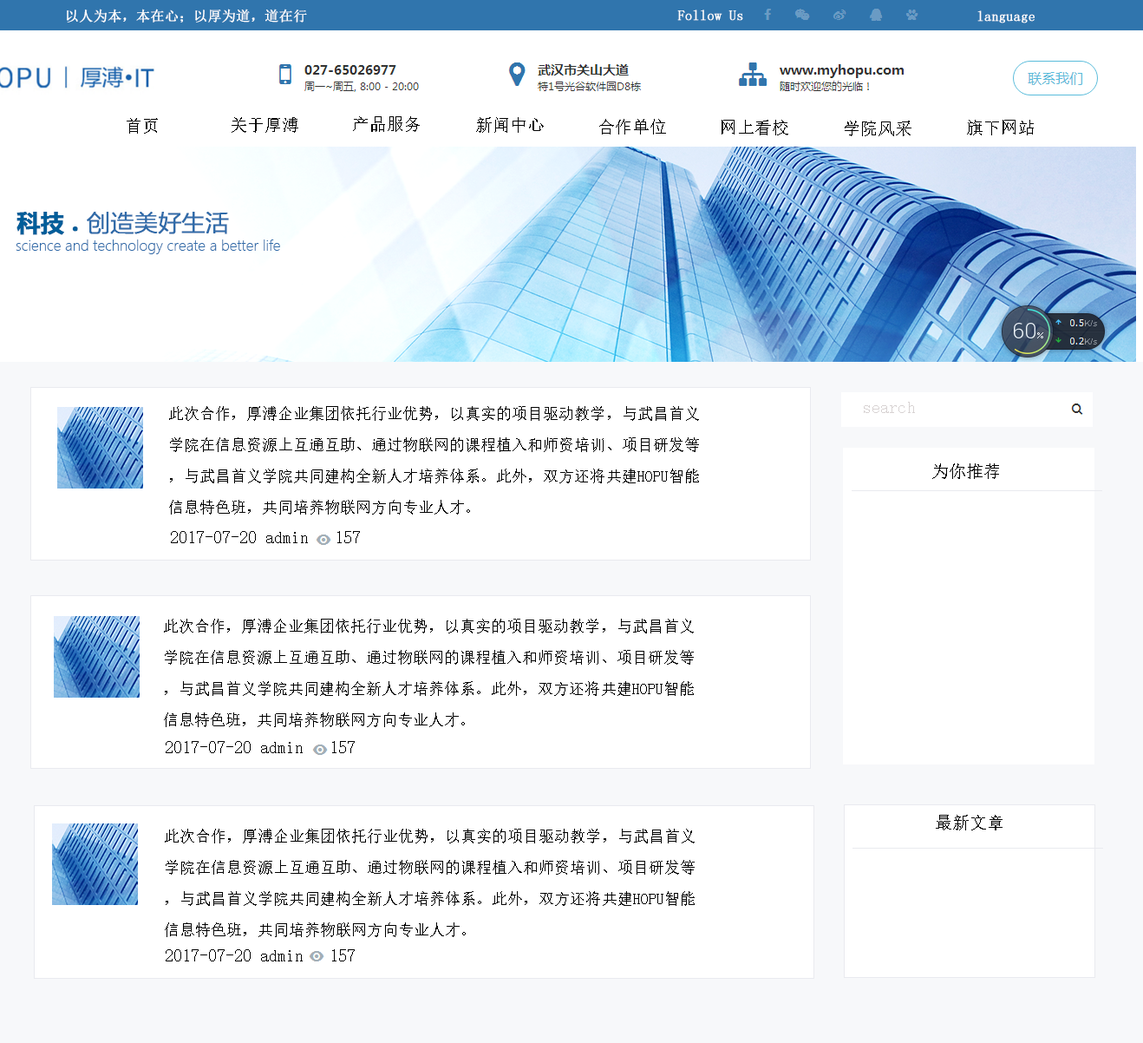
<style>
.page{position:relative;width:1143px;height:1043px;background:#ffffff}
.page>*{position:absolute;margin:0}
.t1{font:13.9px "SimSun";letter-spacing:0.002em;color:#ffffff;font-weight:bold}
.t2{font:17.4px "SimSun";letter-spacing:0.002em;color:#000000}
.t3{font:17.4px "SimSun";letter-spacing:0.002em;color:#d8d3d3}
.t4{font:15.6px/31.2px "SimSun";letter-spacing:0.002em;color:#000000}
</style>
<div class="page">
<p class="t1" style="left:67px;top:9px;width:240px;height:14px">以人为本，本在心；以厚为道，道在行</p>
<p class="t1" style="left:678px;top:10px;width:66px;height:11px">Follow Us</p>
<p class="t1" style="left:978px;top:10px;width:57px;height:13px">language</p>
<p class="t2" style="left:127px;top:118px;width:31px;height:16px">首页</p>
<p class="t2" style="left:232px;top:117px;width:66px;height:16px">关于厚溥</p>
<p class="t2" style="left:353px;top:116px;width:67px;height:16px">产品服务</p>
<p class="t2" style="left:476px;top:117px;width:68px;height:16px">新闻中心</p>
<p class="t2" style="left:599px;top:119px;width:67px;height:15px">合作单位</p>
<p class="t2" style="left:722px;top:120px;width:67px;height:15px">网上看校</p>
<p class="t2" style="left:845px;top:121px;width:67px;height:15px">学院风采</p>
<p class="t2" style="left:967px;top:120px;width:67px;height:15px">旗下网站</p>
<p class="t3" style="left:864px;top:402px;width:51px;height:11px">search</p>
<p class="t4" style="left:169px;top:406px;width:530px;height:108px">此次合作，厚溥企业集团依托行业优势，以真实的项目驱动教学，与武昌首义<br>学院在信息资源上互通互助、通过物联网的课程植入和师资培训、项目研发等<br>，与武昌首义学院共同建构全新人才培养体系。此外，双方还将共建HOPU智能<br>信息特色班，共同培养物联网方向专业人才。</p>
<p class="t2" style="left:933px;top:463px;width:66px;height:16px">为你推荐</p>
<p class="t2" style="left:171px;top:531px;width:189px;height:12px">2017-07-20 admin   157</p>
<p class="t4" style="left:164px;top:619px;width:530px;height:108px">此次合作，厚溥企业集团依托行业优势，以真实的项目驱动教学，与武昌首义<br>学院在信息资源上互通互助、通过物联网的课程植入和师资培训、项目研发等<br>，与武昌首义学院共同建构全新人才培养体系。此外，双方还将共建HOPU智能<br>信息特色班，共同培养物联网方向专业人才。</p>
<p class="t2" style="left:166px;top:741px;width:189px;height:12px">2017-07-20 admin   157</p>
<p class="t2" style="left:936px;top:815px;width:67px;height:15px">最新文章</p>
<p class="t4" style="left:165px;top:829px;width:530px;height:108px">此次合作，厚溥企业集团依托行业优势，以真实的项目驱动教学，与武昌首义<br>学院在信息资源上互通互助、通过物联网的课程植入和师资培训、项目研发等<br>，与武昌首义学院共同建构全新人才培养体系。此外，双方还将共建HOPU智能<br>信息特色班，共同培养物联网方向专业人才。</p>
<p class="t2" style="left:166px;top:949px;width:189px;height:12px">2017-07-20 admin   157</p>
</div>
